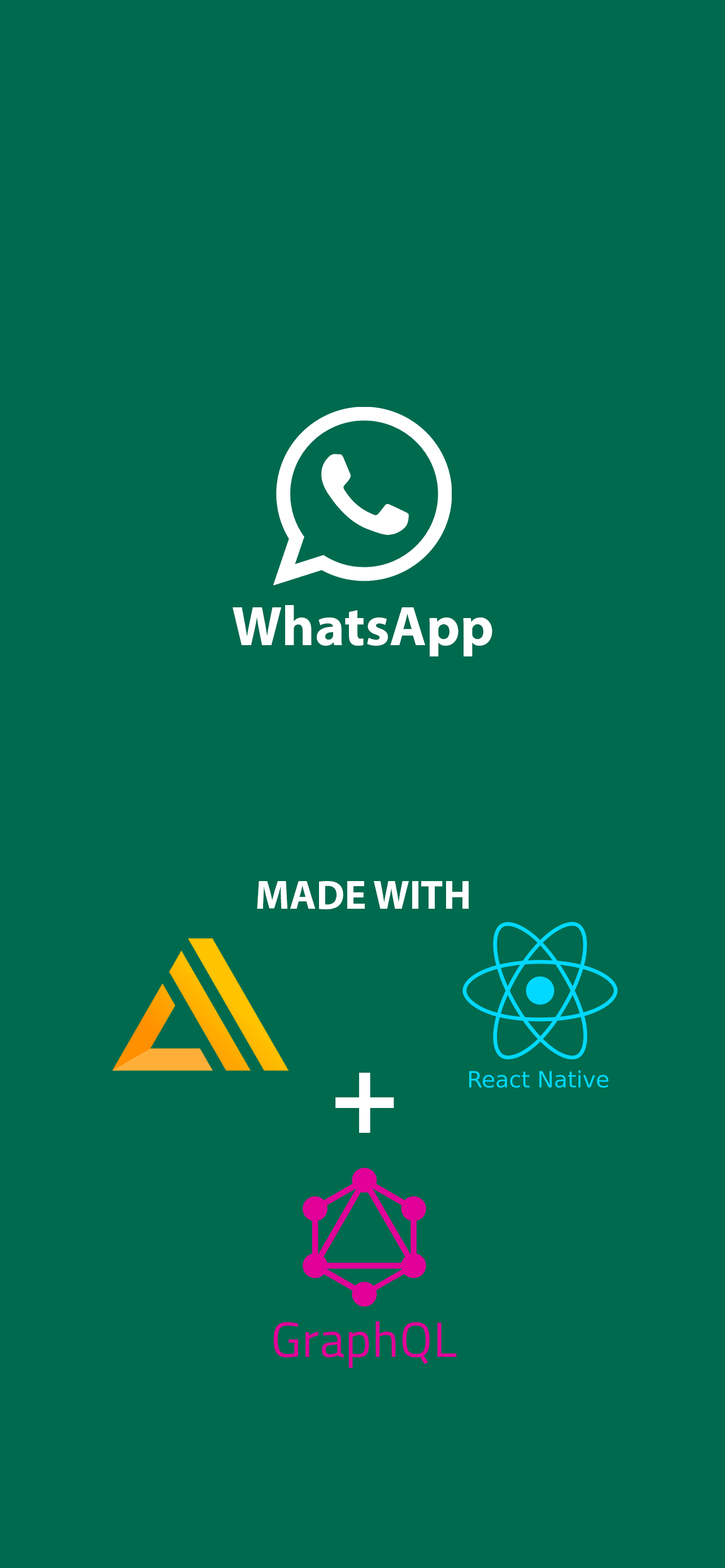
<style>
.page{position:relative;width:725px;height:1568px;background:#006a4e}
.page>*{position:absolute;margin:0}
.t1{font:56.4px "MyriadPro-Bold";color:#ffffff}
.t2{font:40.6px "MyriadPro-Bold";color:#ffffff}
.t3{font:112.9px "MyriadPro-Bold";color:#ffffff}
</style>
<div class="page">
<p class="t1" style="left:233px;top:605px;width:259px;height:51px">WhatsApp</p>
<p class="t2" style="left:257px;top:881px;width:211px;height:28px">MADE WITH</p>
<p class="t3" style="left:335px;top:1072px;width:59px;height:61px">+</p>
</div>
